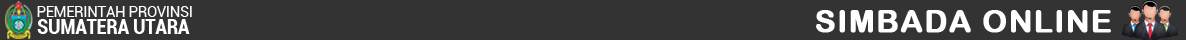
<style>
.page{position:relative;width:1186px;height:40px;background:#333333}
.page>*{position:absolute;margin:0}
.t1{font:14.7px "Roboto-Regular";letter-spacing:-0.02em;color:#ffffff}
.t2{font:20.9px "Roboto-BoldCondensed";letter-spacing:-0.02em;color:#ffffff}
</style>
<div class="page">
<p class="t1" style="left:37px;top:6px;width:155px;height:11px">PEMERINTAH PROVINSI</p>
<p class="t2" style="left:37px;top:19px;width:153px;height:15px">SUMATERA UTARA</p>
</div>
